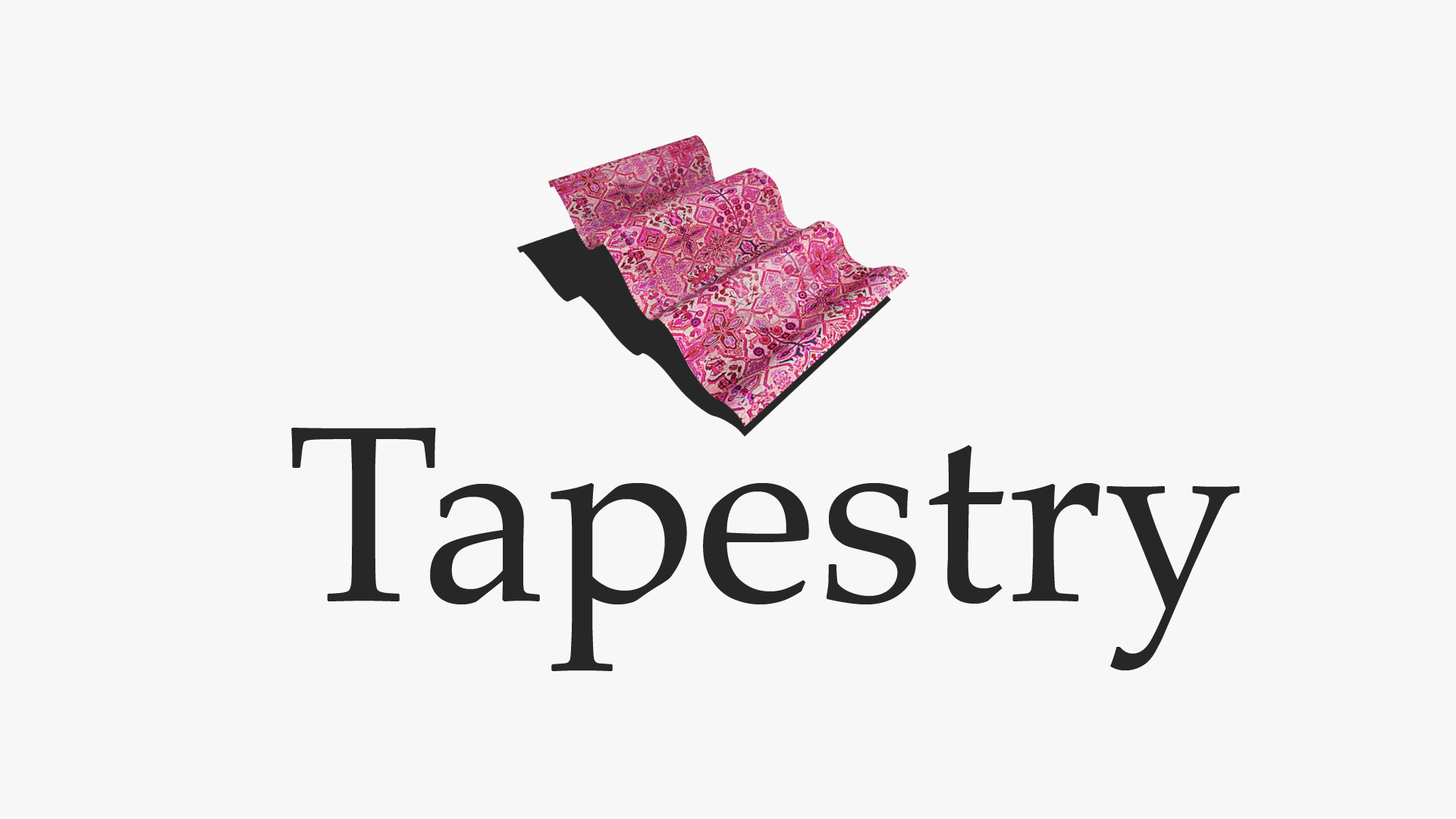
<style>
.page{position:relative;width:1456px;height:819px;background:#f7f7f7}
.page>*{position:absolute;margin:0}
.t1{font:251.3px "PalatinoLinotype-Roman";color:#272727}
</style>
<div class="page">
<p class="t1" style="left:291px;top:428px;width:949px;height:243px">Tapestry</p>
</div>
